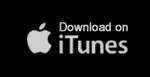
<style>
.page{position:relative;width:150px;height:77px;background:#000000}
.page>*{position:absolute;margin:0}
.t1{font:12.2px "ArialNarrow";color:#cfcfcf;font-weight:bold;scale:1.12 1}
</style>
<div class="page">
<p class="t1" style="left:59px;top:22px;width:69px;height:10px">Download on</p>
</div>
